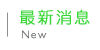
<style>
.page{position:relative;width:100px;height:50px;background:#ffffff}
.page>*{position:absolute;margin:0}
.t1{font:16px "DFYuan-Lt-HK-BF";letter-spacing:0.12em;color:#3ed73a;font-weight:bold}
.t2{font:11px "Humanist521BT-Light";letter-spacing:0.12em;color:#707070;font-weight:bold}
</style>
<div class="page">
<p class="t1" style="left:19px;top:9px;width:71px;height:16px">最新消息</p>
<p class="t2" style="left:22px;top:30px;width:25px;height:9px">New</p>
</div>
